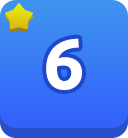
<style>
.page{position:relative;width:128px;height:138px}
.page>*{position:absolute;margin:0}
.t1{font:72px "Ubuntu-Bold";color:#ffffff}
</style>
<div class="page">
<p class="t1" style="left:46px;top:38px;width:36px;height:52px">6</p>
</div>
